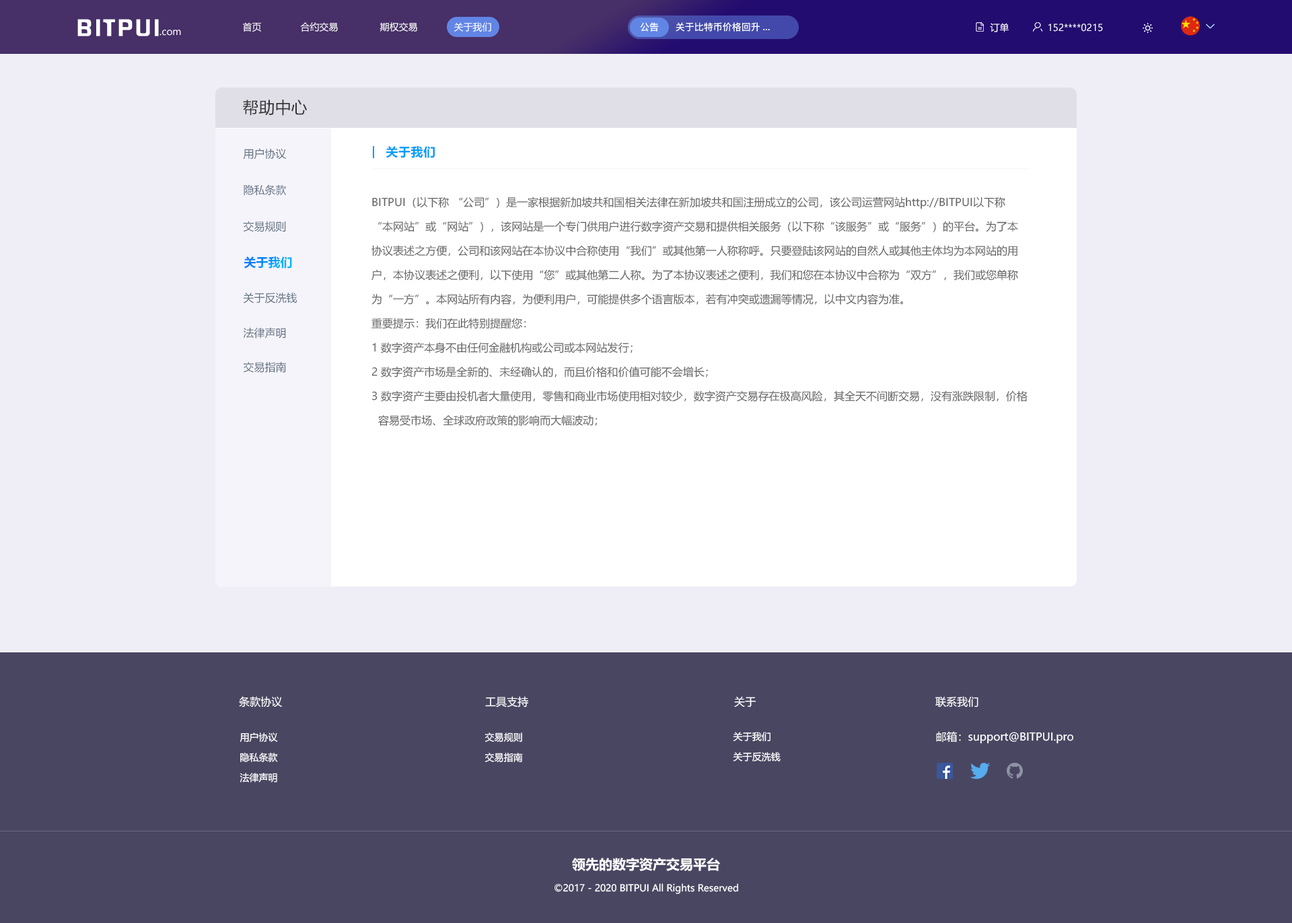
<style>
.page{position:relative;width:1292px;height:923px;background:#efeef7}
.page>*{position:absolute;margin:0}
.t1{font:20.6px "FZHZGBJW--GB1-0";letter-spacing:0.1em;color:#ffffff;scale:1.14 1}
.t2{font:9.4px "MicrosoftYaHei";color:#ffffff}
.t3{font:9.4px "PingFang-SC-Bold";color:#ffffff}
.t4{font:16.2px "MicrosoftYaHei";color:#333333}
.t5{font:10.8px "MicrosoftYaHei";color:#637282}
.t6{font:12.1px "MicrosoftYaHei-Bold";letter-spacing:0.03em;color:#009dfa}
.t7{font:10.8px/24.2px "MicrosoftYaHei";color:#666666}
.t8{font:12.1px "MicrosoftYaHei-Bold"}
.t9{font:10.8px "MicrosoftYaHei";color:#ffffff}
.t10{font:9.4px/20.2px "MicrosoftYaHei";color:#ffffff}
.t11{font:13.5px "MicrosoftYaHei-Bold";color:#ffffff}
</style>
<div class="page">
<p class="t1" style="left:77px;top:19px;width:82px;height:17px">BITPUI</p>
<p class="t2" style="left:160px;top:30px;width:21px;height:6px">.com</p>
<p class="t2" style="left:243px;top:22px;width:248px;height:10px">首页              合约交易               期权交易             关于我们</p>
<p class="t3" style="left:640px;top:22px;width:19px;height:10px">公告</p>
<p class="t3" style="left:676px;top:22px;width:94px;height:10px">关于比特币价格回升...</p>
<p class="t2" style="left:990px;top:23px;width:19px;height:9px">订单</p>
<p class="t2" style="left:1049px;top:24px;width:54px;height:8px">152****0215</p>
<p class="t4" style="left:243px;top:100px;width:65px;height:16px">帮助中心</p>
<p class="t5" style="left:243px;top:148px;width:44px;height:12px">用户协议</p>
<p class="t6" style="left:386px;top:146px;width:49px;height:12px">关于我们</p>
<p class="t5" style="left:244px;top:184px;width:43px;height:11px">隐私条款</p>
<p class="t7" style="left:372px;top:197px;width:656px;height:229px">BITPUI（以下称 “公司”）是一家根据新加坡共和国相关法律在新加坡共和国注册成立的公司，该公司运营网站http://BITPUI以下称<br>“本网站”或“网站”），该网站是一个专门供用户进行数字资产交易和提供相关服务（以下称“该服务”或“服务”）的平台。为了本<br>协议表述之方便，公司和该网站在本协议中合称使用“我们”或其他第一人称称呼。只要登陆该网站的自然人或其他主体均为本网站的用<br>户，本协议表述之便利，以下使用“您”或其他第二人称。为了本协议表述之便利，我们和您在本协议中合称为“双方”，我们或您单称<br>为“一方”。本网站所有内容，为便利用户，可能提供多个语言版本，若有冲突或遗漏等情况，以中文内容为准。<br>重要提示：我们在此特别提醒您：<br>1 数字资产本身不由任何金融机构或公司或本网站发行；<br>2 数字资产市场是全新的、未经确认的，而且价格和价值可能不会增长；<br>3 数字资产主要由投机者大量使用，零售和商业市场使用相对较少，数字资产交易存在极高风险，其全天不间断交易，没有涨跌限制，价格<br>  容易受市场、全球政府政策的影响而大幅波动；</p>
<p class="t5" style="left:243px;top:221px;width:43px;height:11px">交易规则</p>
<p class="t8" style="left:244px;top:256px;width:48px;height:13px">关于我们</p>
<p class="t5" style="left:243px;top:292px;width:54px;height:12px">关于反洗钱</p>
<p class="t5" style="left:243px;top:327px;width:43px;height:12px">法律声明</p>
<p class="t5" style="left:243px;top:361px;width:43px;height:12px">交易指南</p>
<p class="t9" style="left:239px;top:696px;width:43px;height:11px">条款协议</p>
<p class="t9" style="left:485px;top:696px;width:43px;height:11px">工具支持</p>
<p class="t9" style="left:734px;top:696px;width:23px;height:11px">关于</p>
<p class="t9" style="left:936px;top:696px;width:43px;height:11px">联系我们</p>
<p class="t10" style="left:240px;top:732px;width:38px;height:50px;text-align:center">用户协议<br>隐私条款<br>法律声明</p>
<p class="t10" style="left:485px;top:732px;width:38px;height:30px">交易规则<br>交易指南</p>
<p class="t10" style="left:733px;top:732px;width:48px;height:29px">关于我们<br>关于反洗钱</p>
<p class="t9" style="left:936px;top:731px;width:138px;height:13px">邮箱：support@BITPUI.pro</p>
<p class="t11" style="left:572px;top:857px;width:148px;height:14px">领先的数字资产交易平台</p>
<p class="t2" style="left:555px;top:883px;width:183px;height:11px">©2017 - 2020 BITPUI All Rights Reserved</p>
</div>
